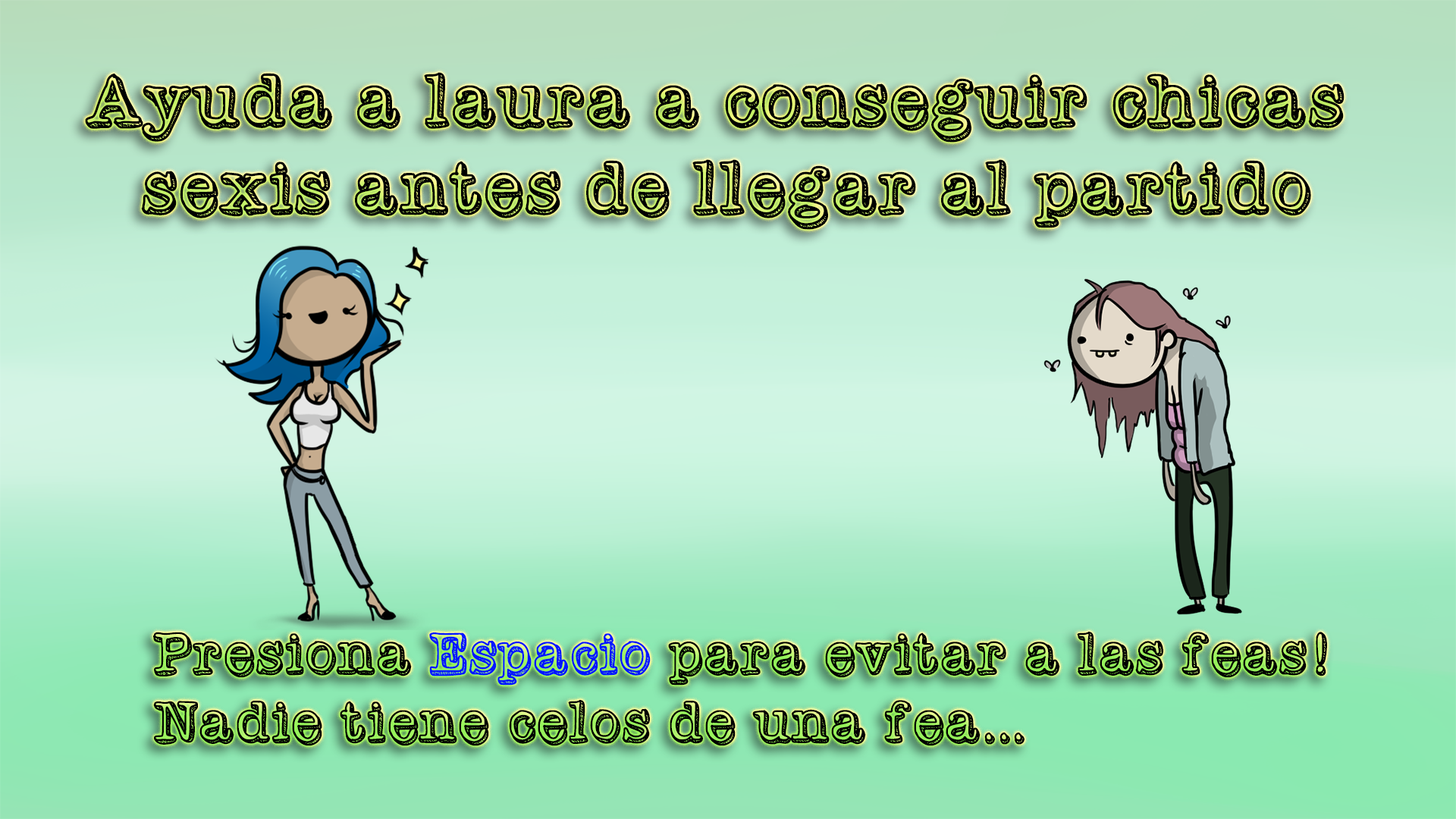
<style>
.page{position:relative;width:1456px;height:819px}
.page>*{position:absolute;margin:0}
.t1{font:72.7px "VintageOne";color:#000000}
.t2{font:56.9px "VintageOne";color:#000000}
.t3{font:56.9px "VintageOne";color:#0416ff}
</style>
<div class="page">
<p class="t1" style="left:85px;top:72px;width:1260px;height:158px;text-align:center">Ayuda a laura a conseguir chicas <br>sexis antes de llegar al partido</p>
<p class="t2" style="left:153px;top:632px;width:1174px;height:114px">Presiona <span class="t3">Espacio</span> para evitar a las feas!<br>Nadie tiene celos de una fea...</p>
</div>
